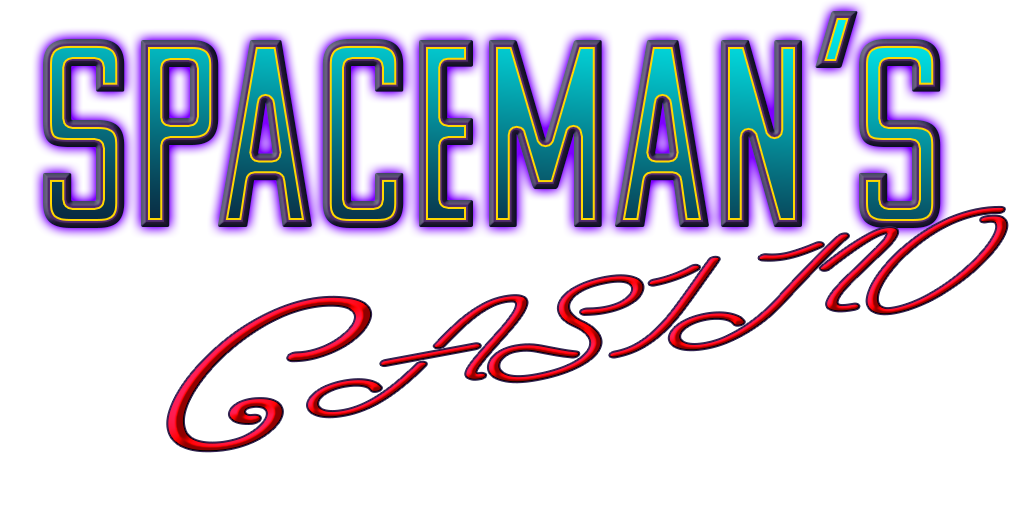
<style>
.page{position:relative;width:1024px;height:512px;background:#ffffff}
.page>*{position:absolute;margin:0}
.t1{font:267.4px "KomuA"}
.t2{font:163.8px "LasEnterPersonalUseOnly";font-variant:small-caps;scale:1.93 1}
</style>
<div class="page">
<p class="t1" style="left:43px;top:11px;width:898px;height:217px">SpaceMan’s</p>
<p class="t2" style="left:167px;top:206px;width:841px;height:246px;rotate:-11deg">Casino</p>
</div>
